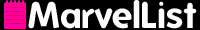
<style>
.page{position:relative;width:200px;height:30px;background:#000000}
.page>*{position:absolute;margin:0}
.t1{font:36px "Folks-Bold";color:#fefefe}
</style>
<div class="page">
<p class="t1" style="left:28px;top:0px;width:169px;height:29px">MarvelList</p>
</div>
